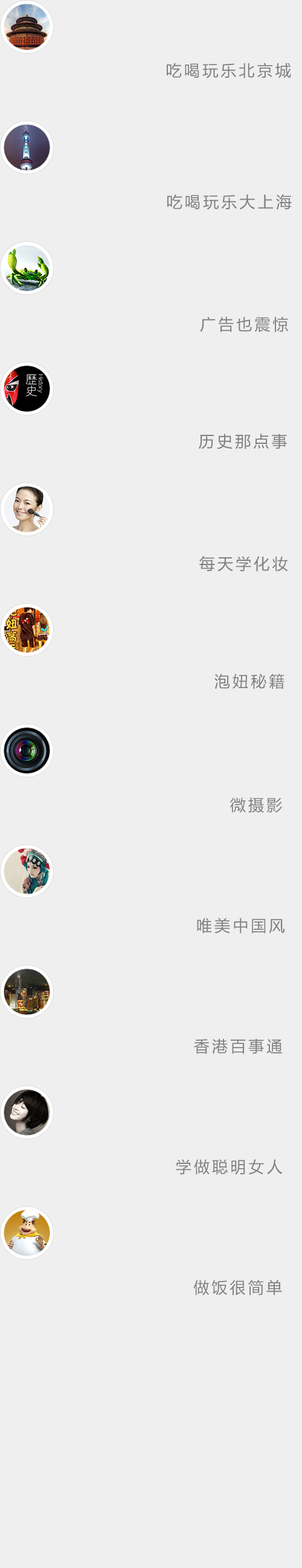
<style>
.page{position:relative;width:302px;height:1568px;background:#efefef}
.page>*{position:absolute;margin:0}
.t1{font:15.7px "MicrosoftYaHei";letter-spacing:0.16em;color:#808080}
</style>
<div class="page">
<p class="t1" style="left:166px;top:63px;width:125px;height:15px">吃喝玩乐北京城</p>
<p class="t1" style="left:167px;top:194px;width:124px;height:16px">吃喝玩乐大上海</p>
<p class="t1" style="left:200px;top:317px;width:88px;height:15px">广告也震惊</p>
<p class="t1" style="left:198px;top:434px;width:88px;height:15px">历史那点事</p>
<p class="t1" style="left:199px;top:556px;width:89px;height:16px">每天学化妆</p>
<p class="t1" style="left:214px;top:674px;width:70px;height:15px">泡妞秘籍</p>
<p class="t1" style="left:230px;top:797px;width:52px;height:16px">微摄影</p>
<p class="t1" style="left:197px;top:918px;width:88px;height:16px">唯美中国风</p>
<p class="t1" style="left:194px;top:1038px;width:88px;height:16px">香港百事通</p>
<p class="t1" style="left:175px;top:1159px;width:107px;height:16px">学做聪明女人</p>
<p class="t1" style="left:193px;top:1280px;width:89px;height:15px">做饭很简单</p>
</div>
